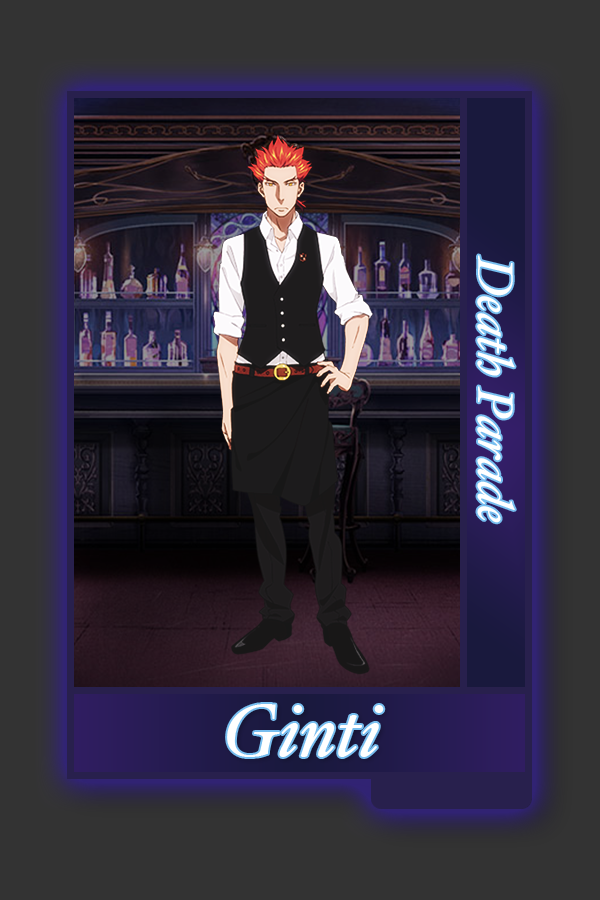
<style>
.page{position:relative;width:600px;height:900px;background:#333333}
.page>*{position:absolute;margin:0}
.t1{font:50px "HoeflerText-Italic";color:#ffffff}
.t2{font:75px "HoeflerText-Italic";color:#ffffff}
</style>
<div class="page">
<p class="t1" style="left:477px;top:255px;width:38px;height:268px;rotate:90deg">Death Parade</p>
<p class="t2" style="left:227px;top:704px;width:157px;height:53px">Ginti</p>
</div>
